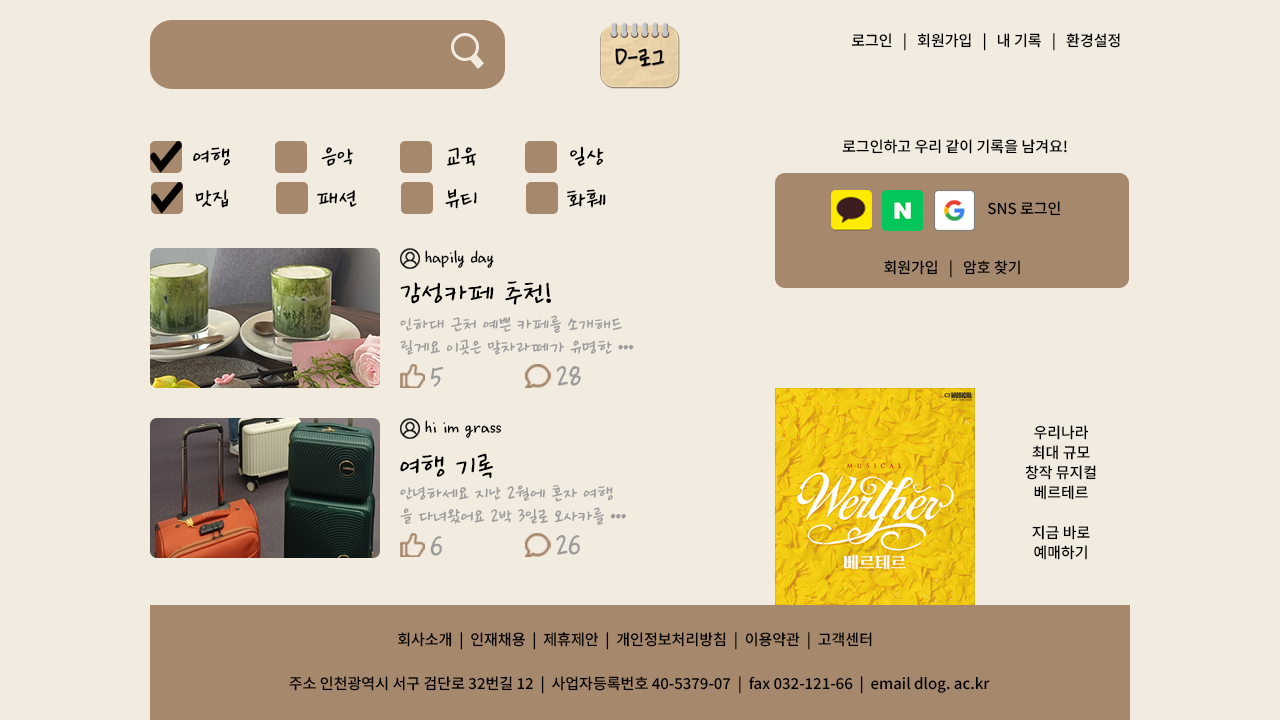
<style>
.page{position:relative;width:1280px;height:720px;background:#f2ebdf}
.page>*{position:absolute;margin:0}
.t1{font:15px "NotoSansKR-Medium";color:#000000}
.t2{font:24.9px "Ownglyph_Dailyokja-Rg";color:#000000}
.t3{font:15.1px "NotoSansKR-Medium";color:#000000}
.t4{font:18.7px "Ownglyph_Dailyokja-Rg";color:#000000}
.t5{font:29.9px "Ownglyph_Dailyokja-Rg";color:#000000}
.t6{font:19px "Ownglyph_Dailyokja-Rg";color:#9c9b9b}
.t7{font:30.1px "Ownglyph_Dailyokja-Rg";color:#9c9b9b}
.t8{font:15px/20px "NotoSansKR-Medium";color:#000000}
.t9{font:30.1px "Ownglyph_Dailyokja-Rg";color:#000000}
.t10{font:18.9px "Ownglyph_Dailyokja-Rg";color:#9c9b9b}
</style>
<div class="page">
<p class="t1" style="left:852px;top:33px;width:268px;height:18px">로그인   |   회원가입   |   내 기록   |   환경설정</p>
<p class="t2" style="left:193px;top:147px;width:38px;height:19px">여행</p>
<p class="t2" style="left:321px;top:147px;width:32px;height:19px">음악</p>
<p class="t2" style="left:447px;top:147px;width:29px;height:19px">교육</p>
<p class="t2" style="left:570px;top:146px;width:34px;height:21px">일상</p>
<p class="t1" style="left:842px;top:139px;width:225px;height:15px">로그인하고 우리 같이 기록을 남겨요!</p>
<p class="t2" style="left:195px;top:189px;width:34px;height:19px">맛집</p>
<p class="t2" style="left:317px;top:190px;width:40px;height:17px">패션</p>
<p class="t2" style="left:445px;top:189px;width:32px;height:20px">뷰티</p>
<p class="t2" style="left:567px;top:189px;width:39px;height:19px">화훼</p>
<p class="t3" style="left:988px;top:201px;width:73px;height:15px">SNS 로그인</p>
<p class="t4" style="left:425px;top:250px;width:69px;height:18px">hapily day</p>
<p class="t3" style="left:884px;top:260px;width:136px;height:18px">회원가입   |   암호 찾기</p>
<p class="t5" style="left:400px;top:281px;width:151px;height:24px">감성카페 추천!</p>
<p class="t6" style="left:400px;top:315px;width:234px;height:40px">인하대 근처 예쁜 카페를 소개해드<br>릴게요 이곳은 말차라떼가 유명한 •••</p>
<p class="t7" style="left:556px;top:365px;width:25px;height:21px">28</p>
<p class="t7" style="left:430px;top:367px;width:14px;height:20px">5</p>
<p class="t4" style="left:425px;top:420px;width:77px;height:18px">hi im grass</p>
<p class="t8" style="left:1025px;top:425px;width:71px;height:135px;text-align:center">우리나라<br>최대 규모<br>창작 뮤지컬<br>베르테르<br><br>지금 바로<br>예매하기</p>
<p class="t9" style="left:400px;top:453px;width:93px;height:25px">여행 기록</p>
<p class="t10" style="left:400px;top:485px;width:226px;height:40px">안녕하세요 지난 2월에 혼자 여행<br>을 다녀왔어요 2박 3일로 오사카를 •••</p>
<p class="t7" style="left:430px;top:536px;width:12px;height:20px">6</p>
<p class="t7" style="left:556px;top:535px;width:24px;height:20px">26</p>
<p class="t3" style="left:398px;top:632px;width:474px;height:18px">회사소개  |  인재채용  |  제휴제안  |  개인정보처리방침  |  이용약관  |  고객센터</p>
<p class="t1" style="left:289px;top:676px;width:701px;height:18px">주소 인천광역시 서구 검단로 32번길 12  |  사업자등록번호 40-5379-07  |  fax 032-121-66  |  email dlog. ac.kr</p>
</div>
